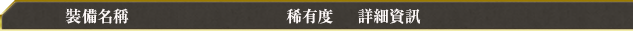
<style>
.page{position:relative;width:633px;height:31px}
.page>*{position:absolute;margin:0}
.t1{font:16px "RyuminPro-ExBold";color:#fef9f8}
</style>
<div class="page">
<p class="t1" style="left:65px;top:8px;width:64px;height:16px">裝備名稱</p>
<p class="t1" style="left:286px;top:8px;width:47px;height:16px">稀有度</p>
<p class="t1" style="left:358px;top:8px;width:63px;height:16px">詳細資訊</p>
</div>
